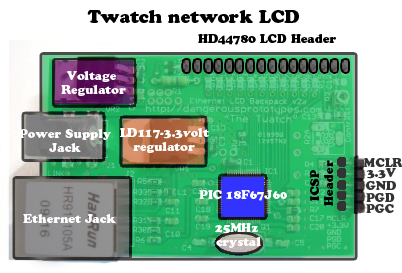
<style>
.page{position:relative;width:402px;height:273px;background:#ffffff}
.page>*{position:absolute;margin:0}
.t1{font:18px "CooperBlackStd";color:#000000}
.t2{font:12px "CooperBlackStd";color:#000000}
.t3{font:12px "CooperBlackStd";color:#ffffff}
.t4{font:12px "CooperBlackStd";color:#333333}
</style>
<div class="page">
<p class="t1" style="left:87px;top:9px;width:212px;height:15px">Twatch network LCD</p>
<p class="t2" style="left:198px;top:34px;width:138px;height:11px">HD44780 LCD Header</p>
<p class="t3" style="left:61px;top:71px;width:65px;height:25px;text-align:center">Voltage<br> Regulator</p>
<p class="t3" style="left:19px;top:129px;width:92px;height:23px;text-align:center">Power Supply<br>Jack</p>
<p class="t3" style="left:119px;top:128px;width:90px;height:25px;text-align:center">LD117-3.3volt<br> regulator</p>
<p class="t2" style="left:310px;top:160px;width:23px;height:46px;text-align:center;rotate:-90deg">ICSP<br> Header</p>
<p class="t4" style="left:364px;top:158px;width:39px;height:9px">MCLR</p>
<p class="t4" style="left:367px;top:168px;width:29px;height:11px">3.3V</p>
<p class="t4" style="left:366px;top:181px;width:30px;height:9px">GND</p>
<p class="t3" style="left:199px;top:190px;width:88px;height:11px">PIC 18F67J60</p>
<p class="t4" style="left:366px;top:193px;width:29px;height:9px">PGD</p>
<p class="t4" style="left:366px;top:204px;width:28px;height:9px">PGC</p>
<p class="t3" style="left:23px;top:213px;width:93px;height:10px">Ethernet Jack</p>
<p class="t3" style="left:215px;top:223px;width:46px;height:25px;text-align:center">25MHz<br> crystal</p>
</div>
